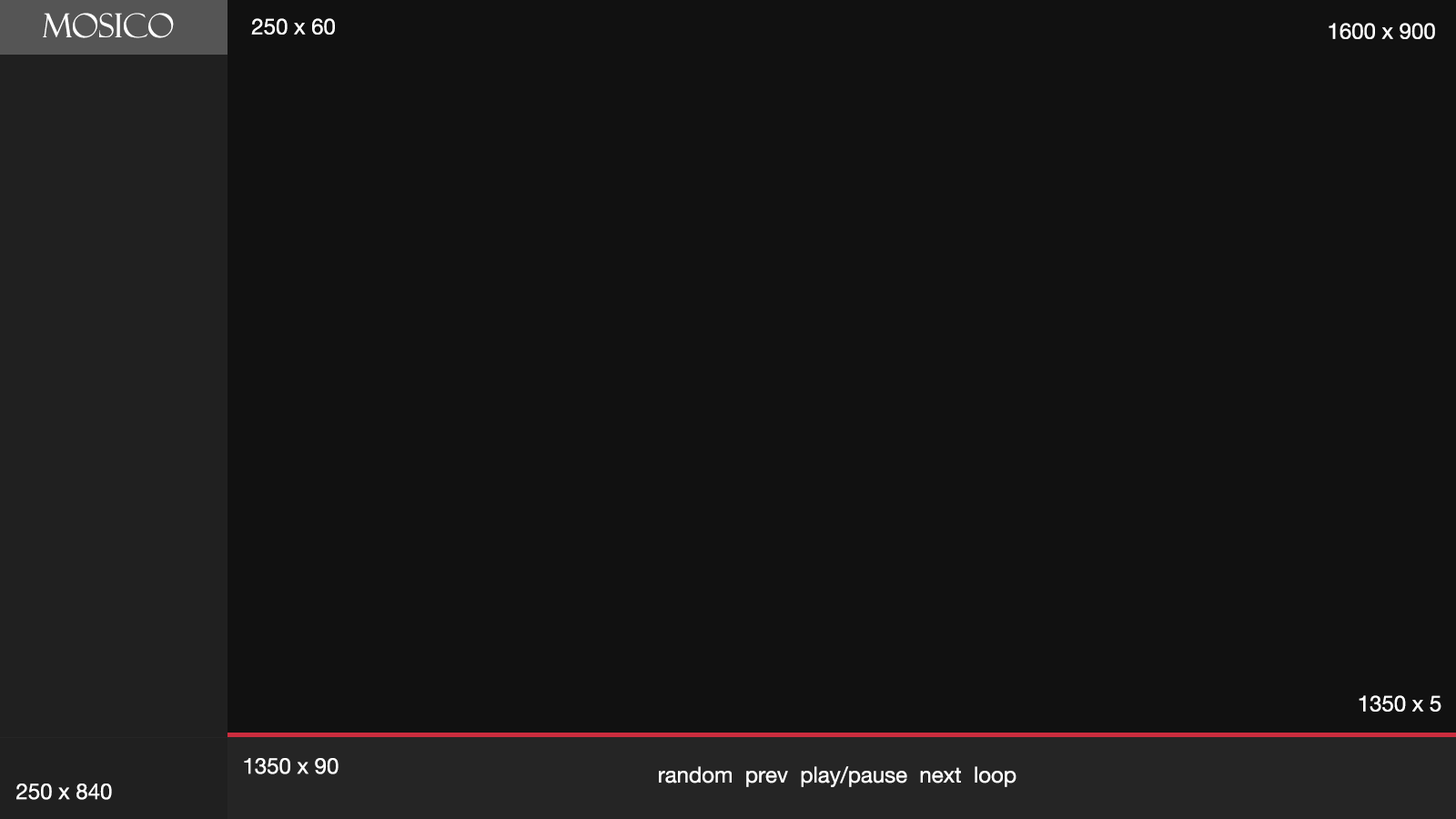
<style>
.page{position:relative;width:1456px;height:819px;background:#111111}
.page>*{position:absolute;margin:0}
.t1{font:32.8px "FelixTitlingMT";color:#ffffff}
.t2{font:21.8px "HelveticaNeueLTPro-Roman";color:#ffffff}
</style>
<div class="page">
<p class="t1" style="left:43px;top:13px;width:131px;height:25px">Mosico</p>
<p class="t2" style="left:251px;top:18px;width:84px;height:17px">250 x 60</p>
<p class="t2" style="left:1329px;top:23px;width:106px;height:16px">1600 x 900</p>
<p class="t2" style="left:1359px;top:695px;width:82px;height:17px">1350 x 5</p>
<p class="t2" style="left:244px;top:758px;width:95px;height:16px">1350 x 90</p>
<p class="t2" style="left:659px;top:766px;width:357px;height:21px">random  prev  play/pause  next  loop</p>
<p class="t2" style="left:16px;top:783px;width:96px;height:17px">250 x 840</p>
</div>
